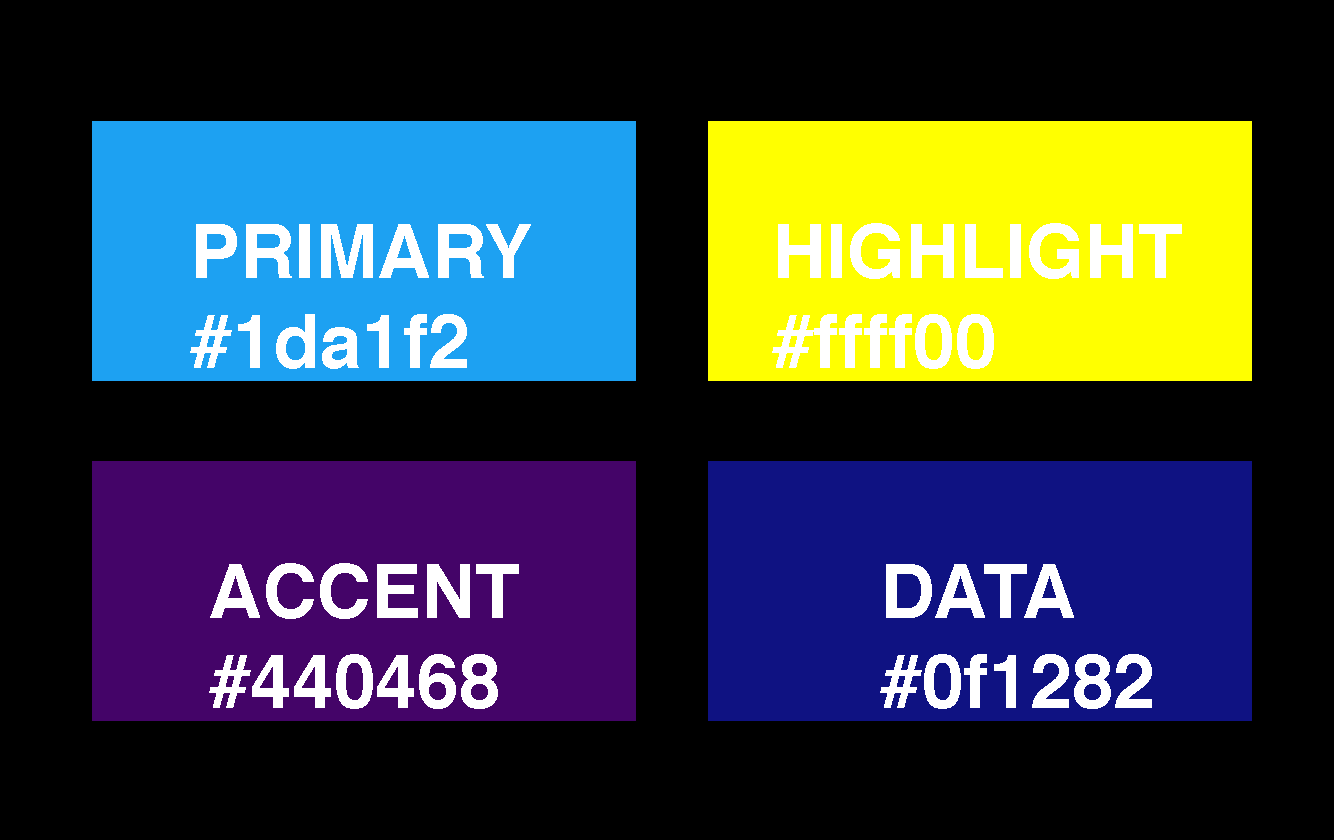
<style>
.page{position:relative;width:1334px;height:840px;background:#000000}
.page>*{position:absolute;margin:0}
.t1{font:75px "Helvetica-Bold";color:#ffffff}
</style>
<div class="page">
<p class="t1" style="left:190px;top:224px;width:341px;height:145px">PRIMARY<br>#1da1f2</p>
<p class="t1" style="left:772px;top:223px;width:410px;height:146px">HIGHLIGHT<br>#ffff00</p>
<p class="t1" style="left:209px;top:563px;width:310px;height:146px">ACCENT<br>#440468</p>
<p class="t1" style="left:880px;top:564px;width:272px;height:145px">DATA<br>#0f1282</p>
</div>
